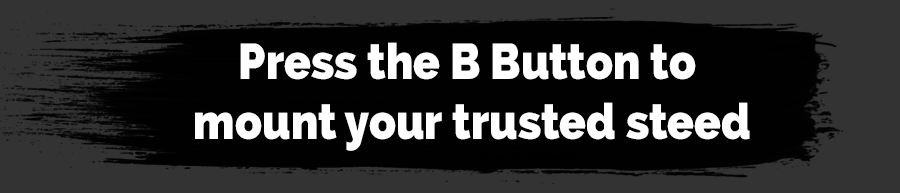
<style>
.page{position:relative;width:900px;height:193px;background:#010101}
.page>*{position:absolute;margin:0}
.t1{font:50px "Raleway-Heavy";color:#ffffff;scale:0.88 1}
</style>
<div class="page">
<p class="t1" style="left:195px;top:42px;width:555px;height:109px;text-align:center">Press the B Button to <br>mount your trusted steed</p>
</div>
